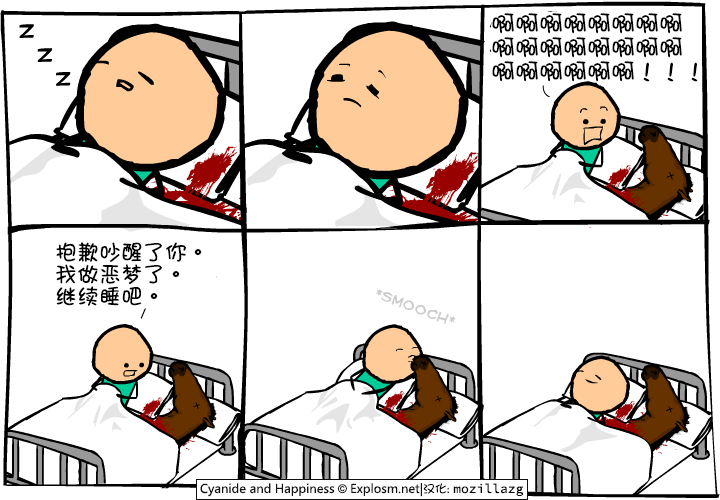
<style>
.page{position:relative;width:720px;height:500px;background:#ffffff}
.page>*{position:absolute;margin:0}
.t1{font:24px/24px "DFGirl";color:#000000}
.t2{font:22px/22px "DFGirl";color:#000000}
</style>
<div class="page">
<p class="t1" style="left:492px;top:13px;width:206px;height:69px">啊啊啊啊啊啊啊啊<br>啊啊啊啊啊啊啊啊<br>啊啊啊啊啊啊！！！</p>
<p class="t2" style="left:56px;top:242px;width:146px;height:64px">抱歉吵醒了你。<br>我做恶梦了。<br>继续睡吧。</p>
</div>
